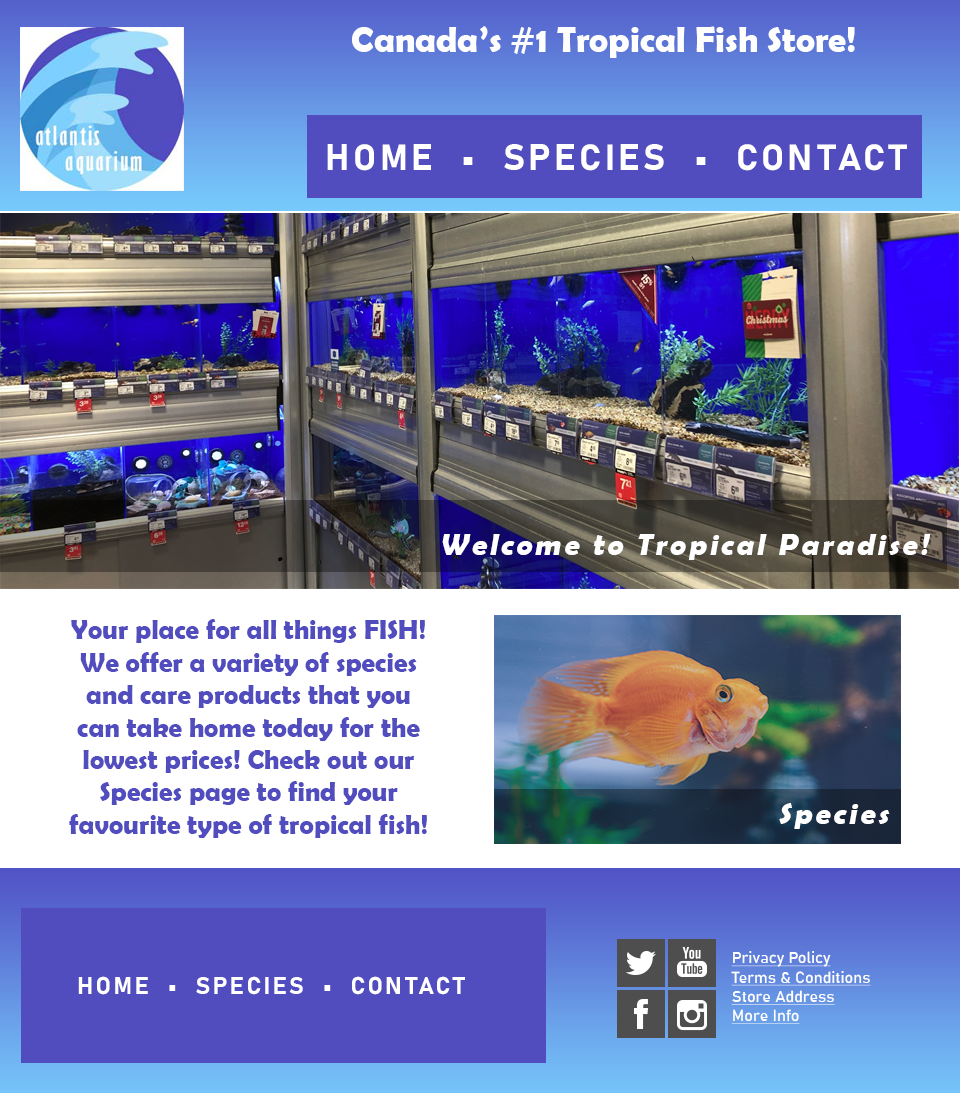
<style>
.page{position:relative;width:960px;height:1093px}
.page>*{position:absolute;margin:0}
.t1{font:36px "BerlinSansFBDemi-Bold";color:#fefefe}
.t2{font:36px "Bahnschrift-Bold";letter-spacing:0.1em;color:#ffffff}
.t3{font:30px "BerlinSansFBDemi-Bold";letter-spacing:0.1em;color:#ffffff;font-style:italic}
.t4{font:27px "BerlinSansFBDemi-Bold";color:#514dbe}
.t5{font:16px "Bahnschrift";color:#ffffff;text-decoration:underline}
.t6{font:24px "Bahnschrift-Bold";letter-spacing:0.1em;color:#ffffff}
</style>
<div class="page">
<p class="t1" style="left:352px;top:26px;width:503px;height:32px">Canada’s #1 Tropical Fish Store!</p>
<p class="t2" style="left:327px;top:144px;width:580px;height:27px">HOME  •  SPECIES  •  CONTACT</p>
<p class="t3" style="left:442px;top:534px;width:489px;height:26px">Welcome to Tropical Paradise!</p>
<p class="t4" style="left:69px;top:619px;width:358px;height:219px;text-align:center">Your place for all things FISH! We offer a variety of species and care products that you can take home today for the lowest prices! Check out our Species page to find your favourite type of tropical fish!</p>
<p class="t3" style="left:779px;top:803px;width:111px;height:26px">Species</p>
<p class="t5" style="left:731px;top:951px;width:140px;height:73px">Privacy Policy<br>Terms &amp; Conditions<br>Store Address<br>More Info</p>
<p class="t6" style="left:78px;top:976px;width:387px;height:19px">HOME  •  SPECIES  •  CONTACT</p>
</div>
